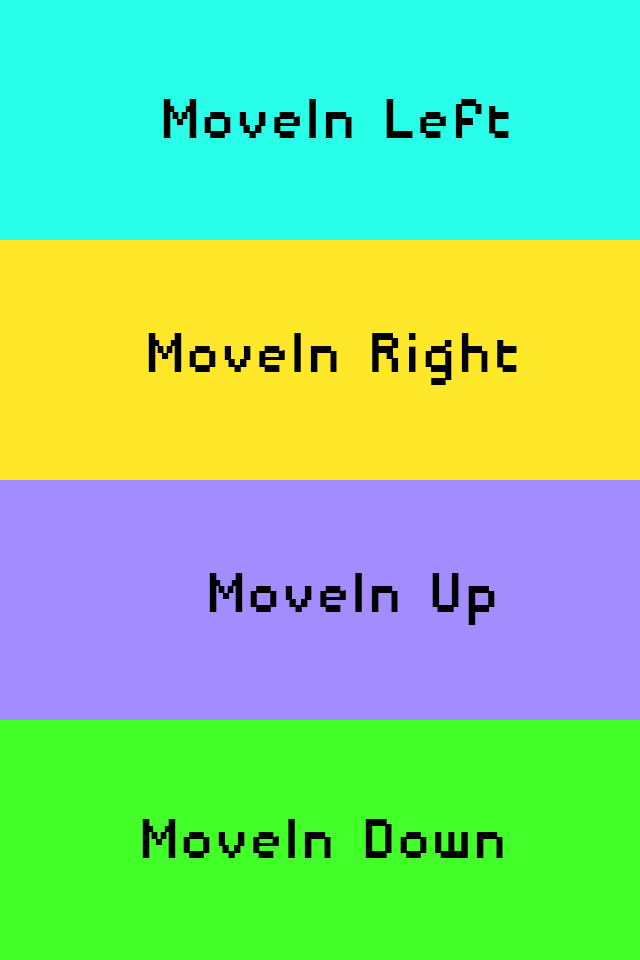
<style>
.page{position:relative;width:640px;height:960px;background:#42fe29}
.page>*{position:absolute;margin:0}
.t1{font:72.6px "DisposableDroidBB";color:#000000}
.t2{font:72.6px "DisposableDroidBB";color:#010101}
</style>
<div class="page">
<p class="t1" style="left:163px;top:99px;width:346px;height:39px">MoveIn Left</p>
<p class="t2" style="left:148px;top:333px;width:369px;height:52px">MoveIn Right</p>
<p class="t2" style="left:209px;top:573px;width:286px;height:52px">MoveIn Up</p>
<p class="t2" style="left:142px;top:819px;width:361px;height:39px">MoveIn Down</p>
</div>
